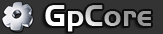
<style>
.page{position:relative;width:163px;height:34px;background:#333333}
.page>*{position:absolute;margin:0}
.t1{font:31.3px "HandelGothicEF-Bold"}
</style>
<div class="page">
<p class="t1" style="left:45px;top:5px;width:106px;height:27px">GpCore</p>
</div>
